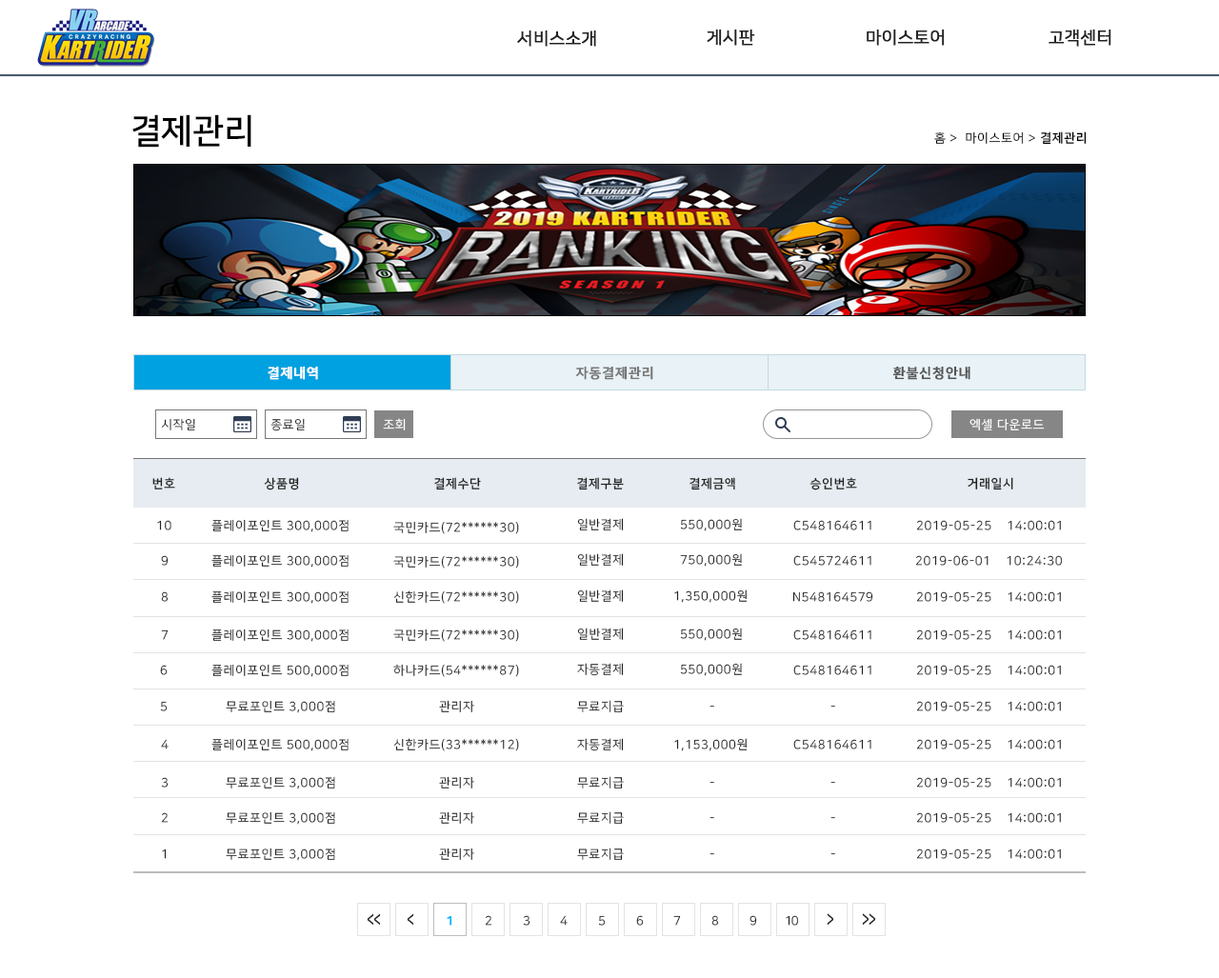
<style>
.page{position:relative;width:1219px;height:978px;background:#ffffff}
.page>*{position:absolute;margin:0}
.t1{font:17.1px "NanumSquareR";color:#222222;font-weight:bold}
.t2{font:34.3px "NanumSquareB";color:#000000}
.t3{font:12.4px "NanumSquareR";letter-spacing:0.05em;color:#000000}
.t4{font:12.4px "NanumSquareB";letter-spacing:0.05em;color:#000000}
.t5{font:13.3px "NanumSquareB";letter-spacing:0.05em;color:#ffffff;font-weight:bold}
.t6{font:13.3px "NanumSquareB";letter-spacing:0.05em;color:#777777;font-weight:bold}
.t7{font:13.3px "NanumSquareB";letter-spacing:0.05em;color:#555555;font-weight:bold}
.t8{font:12.4px "NanumSquareR";letter-spacing:0.05em;color:#222222}
.t9{font:12.4px "NanumSquareR";letter-spacing:0.05em;color:#ffffff}
.t10{font:12.4px "NanumSquareB";letter-spacing:0.05em;color:#222222}
.t11{font:12.4px "NanumSquareR";letter-spacing:0.05em}
.t12{font:19.5px "NanumSquareB";letter-spacing:-0.075em;color:#222222;scale:0.63 1}
.t13{font:12.4px "NanumSquareB";letter-spacing:-0.075em;color:#00b6ff;font-weight:bold}
.t14{font:12.4px "NanumSquareR";letter-spacing:-0.075em}
.t15{font:12.4px "NanumSquareR";letter-spacing:-0.075em;color:#222222}
.t16{font:20.1px "NanumSquareB";letter-spacing:-0.075em;color:#222222;scale:0.61 1}
</style>
<div class="page">
<p class="t1" style="left:517px;top:30px;width:79px;height:17px">서비스소개</p>
<p class="t1" style="left:707px;top:29px;width:48px;height:17px">게시판</p>
<p class="t1" style="left:867px;top:29px;width:78px;height:17px">마이스토어</p>
<p class="t1" style="left:1049px;top:29px;width:62px;height:17px">고객센터</p>
<p class="t2" style="left:132px;top:114px;width:119px;height:34px">결제관리</p>
<p class="t3" style="left:934px;top:131px;width:153px;height:14px">홈 &gt;  마이스토어 &gt; <span class="t4">결제관리</span></p>
<p class="t5" style="left:268px;top:366px;width:50px;height:14px">결제내역</p>
<p class="t6" style="left:576px;top:366px;width:77px;height:14px">자동결제관리</p>
<p class="t7" style="left:892px;top:366px;width:79px;height:14px">환불신청안내</p>
<p class="t8" style="left:161px;top:418px;width:34px;height:12px">시작일</p>
<p class="t8" style="left:270px;top:418px;width:35px;height:13px">종료일</p>
<p class="t9" style="left:383px;top:418px;width:23px;height:12px">조회</p>
<p class="t9" style="left:970px;top:418px;width:75px;height:12px">엑셀 다운로드</p>
<p class="t10" style="left:152px;top:477px;width:23px;height:13px">번호</p>
<p class="t10" style="left:264px;top:477px;width:35px;height:13px">상품명</p>
<p class="t10" style="left:434px;top:477px;width:47px;height:13px">결제수단</p>
<p class="t10" style="left:577px;top:477px;width:47px;height:13px">결제구분</p>
<p class="t10" style="left:690px;top:477px;width:45px;height:13px">결제금액</p>
<p class="t10" style="left:810px;top:477px;width:47px;height:13px">승인번호</p>
<p class="t10" style="left:968px;top:477px;width:45px;height:13px">거래일시</p>
<p class="t8" style="left:157px;top:520px;width:14px;height:10px">10</p>
<p class="t8" style="left:211px;top:519px;width:138px;height:13px">플레이포인트 300,000점</p>
<p class="t8" style="left:393px;top:521px;width:126px;height:13px">국민카드(72******30)</p>
<p class="t8" style="left:577px;top:518px;width:47px;height:12px">일반결제</p>
<p class="t8" style="left:680px;top:518px;width:62px;height:13px">550,000원</p>
<p class="t8" style="left:793px;top:520px;width:78px;height:10px">C548164611</p>
<p class="t8" style="left:916px;top:520px;width:145px;height:10px">2019-05-25    14:00:01</p>
<p class="t8" style="left:161px;top:555px;width:8px;height:11px">9</p>
<p class="t8" style="left:211px;top:554px;width:138px;height:14px">플레이포인트 300,000점</p>
<p class="t8" style="left:393px;top:555px;width:126px;height:14px">국민카드(72******30)</p>
<p class="t8" style="left:577px;top:553px;width:47px;height:13px">일반결제</p>
<p class="t8" style="left:680px;top:553px;width:62px;height:14px">750,000원</p>
<p class="t8" style="left:793px;top:555px;width:78px;height:11px">C545724611</p>
<p class="t8" style="left:915px;top:555px;width:147px;height:11px">2019-06-01    10:24:30</p>
<p class="t11" style="left:161px;top:591px;width:8px;height:11px">8</p>
<p class="t8" style="left:211px;top:590px;width:138px;height:14px">플레이포인트 300,000점</p>
<p class="t8" style="left:393px;top:590px;width:126px;height:14px">신한카드(72******30)</p>
<p class="t8" style="left:577px;top:590px;width:47px;height:12px">일반결제</p>
<p class="t8" style="left:674px;top:590px;width:74px;height:13px">1,350,000원</p>
<p class="t8" style="left:792px;top:591px;width:81px;height:11px">N548164579</p>
<p class="t8" style="left:916px;top:591px;width:145px;height:11px">2019-05-25    14:00:01</p>
<p class="t8" style="left:161px;top:630px;width:8px;height:10px">7</p>
<p class="t8" style="left:211px;top:629px;width:138px;height:13px">플레이포인트 300,000점</p>
<p class="t8" style="left:393px;top:629px;width:126px;height:13px">국민카드(72******30)</p>
<p class="t8" style="left:577px;top:628px;width:47px;height:12px">일반결제</p>
<p class="t8" style="left:680px;top:628px;width:62px;height:13px">550,000원</p>
<p class="t8" style="left:793px;top:630px;width:78px;height:10px">C548164611</p>
<p class="t8" style="left:916px;top:630px;width:145px;height:10px">2019-05-25    14:00:01</p>
<p class="t11" style="left:160px;top:665px;width:8px;height:10px">6</p>
<p class="t8" style="left:211px;top:664px;width:138px;height:13px">플레이포인트 500,000점</p>
<p class="t8" style="left:393px;top:664px;width:126px;height:13px">하나카드(54******87)</p>
<p class="t8" style="left:577px;top:663px;width:47px;height:13px">자동결제</p>
<p class="t8" style="left:680px;top:663px;width:62px;height:13px">550,000원</p>
<p class="t8" style="left:793px;top:665px;width:78px;height:10px">C548164611</p>
<p class="t8" style="left:916px;top:665px;width:145px;height:10px">2019-05-25    14:00:01</p>
<p class="t11" style="left:160px;top:701px;width:8px;height:10px">5</p>
<p class="t8" style="left:226px;top:700px;width:109px;height:13px">무료포인트 3,000점</p>
<p class="t8" style="left:439px;top:700px;width:35px;height:12px">관리자</p>
<p class="t8" style="left:577px;top:700px;width:47px;height:12px">무료지급</p>
<p class="t8" style="left:916px;top:701px;width:145px;height:10px">2019-05-25    14:00:01</p>
<p class="t11" style="left:710px;top:706px;width:4px;height:2px">-</p>
<p class="t11" style="left:831px;top:706px;width:4px;height:2px">-</p>
<p class="t11" style="left:161px;top:739px;width:8px;height:11px">4</p>
<p class="t8" style="left:211px;top:738px;width:138px;height:13px">플레이포인트 500,000점</p>
<p class="t8" style="left:393px;top:738px;width:126px;height:13px">신한카드(33******12)</p>
<p class="t8" style="left:577px;top:738px;width:47px;height:13px">자동결제</p>
<p class="t8" style="left:674px;top:738px;width:74px;height:13px">1,153,000원</p>
<p class="t8" style="left:793px;top:739px;width:78px;height:11px">C548164611</p>
<p class="t8" style="left:916px;top:739px;width:145px;height:11px">2019-05-25    14:00:01</p>
<p class="t8" style="left:161px;top:777px;width:8px;height:11px">3</p>
<p class="t8" style="left:226px;top:776px;width:109px;height:14px">무료포인트 3,000점</p>
<p class="t8" style="left:439px;top:776px;width:35px;height:13px">관리자</p>
<p class="t8" style="left:577px;top:776px;width:47px;height:13px">무료지급</p>
<p class="t11" style="left:710px;top:782px;width:4px;height:2px">-</p>
<p class="t11" style="left:831px;top:782px;width:4px;height:2px">-</p>
<p class="t8" style="left:916px;top:777px;width:145px;height:11px">2019-05-25    14:00:01</p>
<p class="t11" style="left:161px;top:812px;width:8px;height:11px">2</p>
<p class="t8" style="left:226px;top:811px;width:109px;height:14px">무료포인트 3,000점</p>
<p class="t8" style="left:439px;top:811px;width:35px;height:13px">관리자</p>
<p class="t8" style="left:577px;top:811px;width:47px;height:13px">무료지급</p>
<p class="t11" style="left:710px;top:817px;width:4px;height:2px">-</p>
<p class="t11" style="left:831px;top:817px;width:4px;height:2px">-</p>
<p class="t8" style="left:916px;top:812px;width:145px;height:11px">2019-05-25    14:00:01</p>
<p class="t8" style="left:162px;top:849px;width:5px;height:10px">1</p>
<p class="t8" style="left:226px;top:848px;width:109px;height:13px">무료포인트 3,000점</p>
<p class="t8" style="left:439px;top:848px;width:35px;height:12px">관리자</p>
<p class="t8" style="left:577px;top:848px;width:47px;height:12px">무료지급</p>
<p class="t11" style="left:710px;top:853px;width:4px;height:2px">-</p>
<p class="t11" style="left:831px;top:853px;width:4px;height:2px">-</p>
<p class="t8" style="left:916px;top:849px;width:145px;height:10px">2019-05-25    14:00:01</p>
<p class="t12" style="left:367px;top:913px;width:14px;height:13px">&lt;&lt;</p>
<p class="t12" style="left:407px;top:913px;width:7px;height:13px">&lt;</p>
<p class="t13" style="left:447px;top:915px;width:5px;height:11px">1</p>
<p class="t14" style="left:485px;top:915px;width:7px;height:11px">2</p>
<p class="t15" style="left:523px;top:915px;width:7px;height:11px">3</p>
<p class="t14" style="left:560px;top:915px;width:8px;height:11px">4</p>
<p class="t14" style="left:598px;top:915px;width:8px;height:11px">5</p>
<p class="t14" style="left:636px;top:915px;width:8px;height:11px">6</p>
<p class="t15" style="left:673px;top:915px;width:8px;height:11px">7</p>
<p class="t14" style="left:711px;top:915px;width:8px;height:11px">8</p>
<p class="t15" style="left:750px;top:915px;width:7px;height:11px">9</p>
<p class="t15" style="left:786px;top:915px;width:12px;height:11px">10</p>
<p class="t16" style="left:827px;top:913px;width:7px;height:13px;rotate:180deg">&lt;</p>
<p class="t16" style="left:862px;top:913px;width:14px;height:13px;rotate:180deg">&lt;&lt;</p>
</div>
